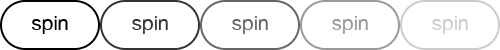
<style>
.page{position:relative;width:500px;height:50px;background:#ffffff}
.page>*{position:absolute;margin:0}
.t1{font:20px "HelveticaNeue";color:#000000}
.t2{font:20px "HelveticaNeue";color:#333333}
.t3{font:20px "HelveticaNeue";color:#666666}
.t4{font:20px "HelveticaNeue";color:#999999}
.t5{font:20px "HelveticaNeue";color:#cccccc}
</style>
<div class="page">
<p class="t1" style="left:32px;top:16px;width:36px;height:18px">spin</p>
<p class="t2" style="left:132px;top:16px;width:36px;height:18px">spin</p>
<p class="t3" style="left:232px;top:16px;width:36px;height:18px">spin</p>
<p class="t4" style="left:332px;top:16px;width:36px;height:18px">spin</p>
<p class="t5" style="left:432px;top:16px;width:36px;height:18px">spin</p>
</div>
